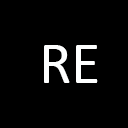
<style>
.page{position:relative;width:128px;height:128px;background:#000000}
.page>*{position:absolute;margin:0}
.t1{font:60px "Calibri";color:#feffff}
</style>
<div class="page">
<p class="t1" style="left:44px;top:45px;width:54px;height:38px">RE</p>
</div>
